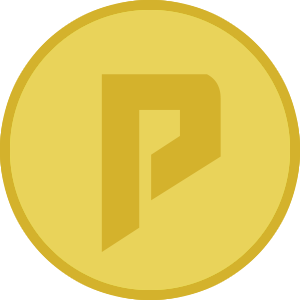
<style>
.page{position:relative;width:300px;height:300px;background:#e9d35a}
.page>*{position:absolute;margin:0}
.t1{font:220.7px "AmazObitaemOstrovV.2";color:#d4b22c}
</style>
<div class="page">
<p class="t1" style="left:101px;top:74px;width:120px;height:178px">P</p>
</div>
